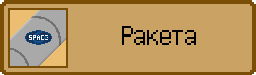
<style>
.page{position:relative;width:256px;height:75px;background:#caa364}
.page>*{position:absolute;margin:0}
.t1{font:25px "XENOA";color:#000000}
</style>
<div class="page">
<p class="t1" style="left:122px;top:26px;width:74px;height:19px">Ракета</p>
</div>
